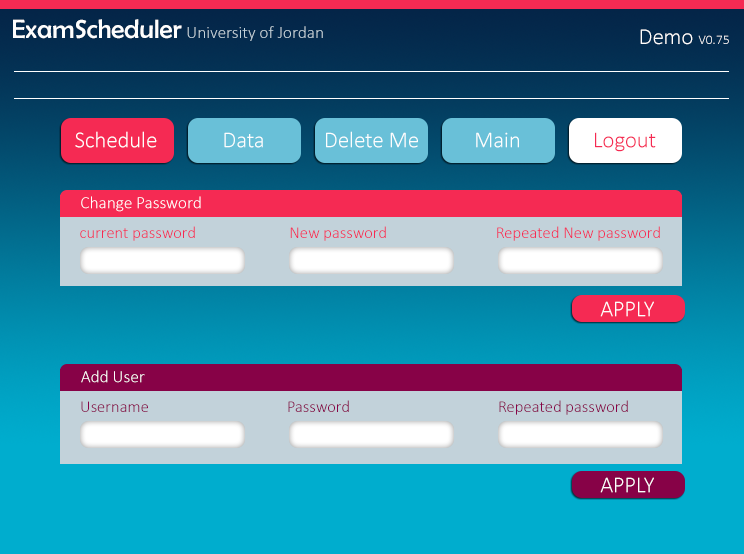
<style>
.page{position:relative;width:744px;height:554px}
.page>*{position:absolute;margin:0}
.t1{font:26.7px "BerlinSansFB-Reg";color:#fefefe}
.t2{font:17.3px "Calibri-Light";color:#c2d2da}
.t3{font:13.3px "Calibri-Light";color:#fefefe}
.t4{font:22.7px "Calibri-Light";color:#fefefe}
.t5{font:22.7px "Calibri-Light";color:#f52a53}
.t6{font:17.3px "Calibri-Light";color:#ffffff}
.t7{font:16.7px "Calibri-Light";color:#f52a53}
.t8{font:16.7px "Calibri-Light";color:#870247}
</style>
<div class="page">
<p class="t1" style="left:13px;top:19px;width:169px;height:20px">ExamScheduler</p>
<p class="t2" style="left:187px;top:26px;width:136px;height:15px">University of Jordan</p>
<p class="t3" style="left:640px;top:29px;width:89px;height:16px"><span class="t4">Demo </span>V0.75</p>
<p class="t4" style="left:75px;top:131px;width:82px;height:17px">Schedule</p>
<p class="t4" style="left:224px;top:132px;width:39px;height:16px">Data</p>
<p class="t4" style="left:326px;top:131px;width:92px;height:17px">Delete Me</p>
<p class="t4" style="left:476px;top:132px;width:43px;height:16px">Main</p>
<p class="t5" style="left:595px;top:132px;width:61px;height:20px">Logout</p>
<p class="t6" style="left:81px;top:196px;width:120px;height:16px">Change Password</p>
<p class="t7" style="left:80px;top:226px;width:115px;height:15px">current password</p>
<p class="t7" style="left:290px;top:226px;width:96px;height:15px">New password</p>
<p class="t7" style="left:497px;top:226px;width:163px;height:15px">Repeated New password</p>
<p class="t4" style="left:600px;top:301px;width:54px;height:16px">APPLY</p>
<p class="t6" style="left:81px;top:370px;width:64px;height:13px">Add User</p>
<p class="t8" style="left:81px;top:401px;width:67px;height:11px">Username</p>
<p class="t8" style="left:288px;top:400px;width:61px;height:12px">Password</p>
<p class="t8" style="left:499px;top:400px;width:129px;height:15px">Repeated password</p>
<p class="t4" style="left:600px;top:477px;width:54px;height:16px">APPLY</p>
</div>
